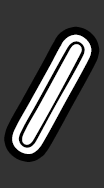
<style>
.page{position:relative;width:104px;height:188px;background:#333333}
.page>*{position:absolute;margin:0}
.t1{font:150px "DokiDokiFantasia";color:#ffffff}
</style>
<div class="page">
<p class="t1" style="left:12px;top:34px;width:80px;height:120px">/</p>
</div>
